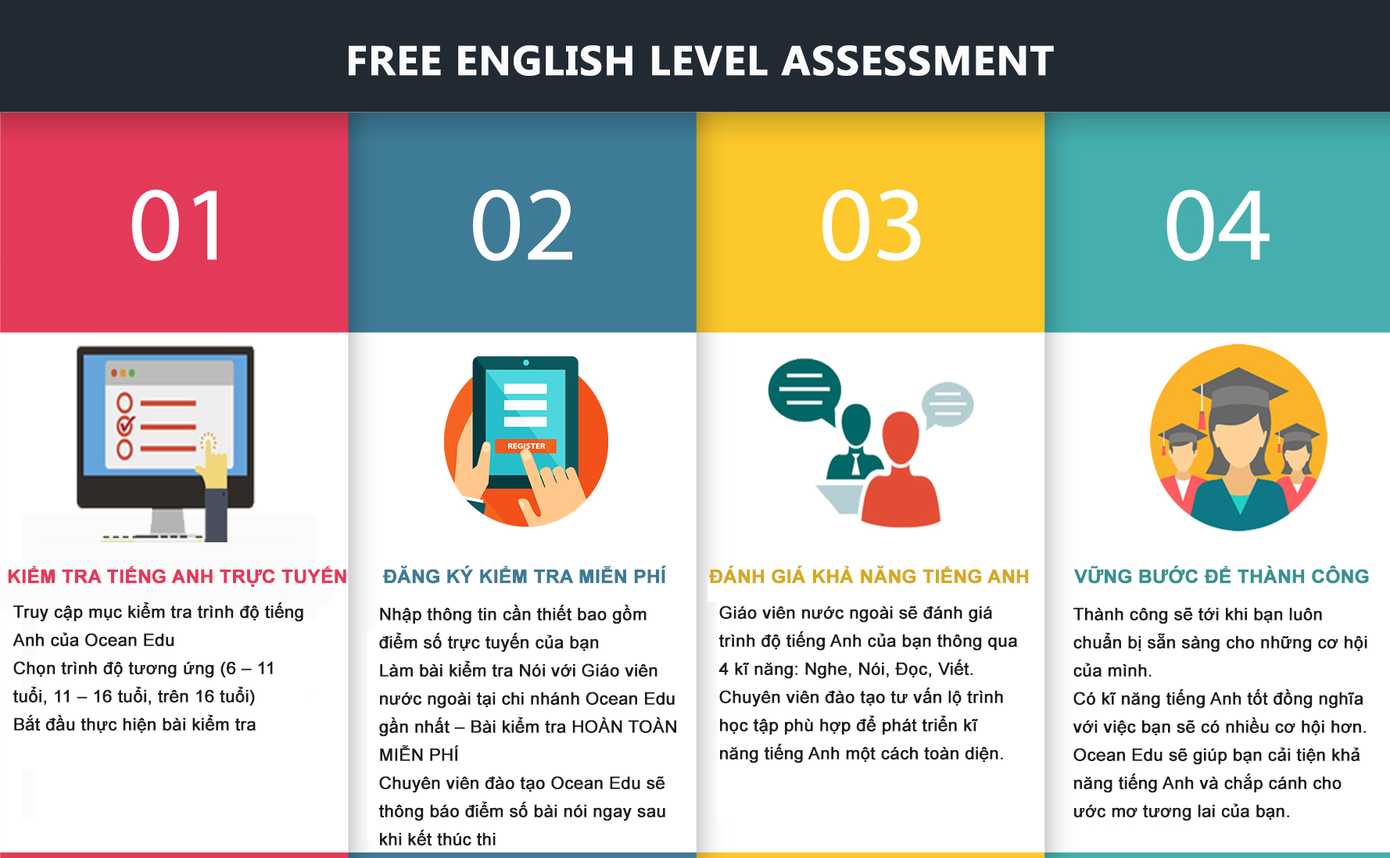
<style>
.page{position:relative;width:1390px;height:858px;background:#ffffff}
.page>*{position:absolute;margin:0}
.t1{font:18.8px "Arial-BoldMT";color:#e33a59;font-weight:bold}
.t2{font:18.8px "Arial-BoldMT";color:#3e7b97;font-weight:bold}
.t3{font:18.8px "Arial-BoldMT";color:#d4a924;font-weight:bold}
.t4{font:18.8px "Arial-BoldMT";color:#399192;font-weight:bold}
.t5{font:17.2px/28.1px "ArialMT";color:#201d1e;font-weight:bold}
</style>
<div class="page">
<p class="t1" style="left:8px;top:566px;width:338px;height:21px">KIỂM TRA TIẾNG ANH TRỰC TUYẾN</p>
<p class="t2" style="left:383px;top:565px;width:284px;height:19px">ĐĂNG KÝ KIỂM TRA MIỄN PHÍ</p>
<p class="t3" style="left:709px;top:565px;width:320px;height:19px">ĐÁNH GIÁ KHẢ NĂNG TIẾNG ANH</p>
<p class="t4" style="left:1074px;top:565px;width:294px;height:19px">VỮNG BƯỚC ĐỂ THÀNH CÔNG</p>
<p class="t5" style="left:13px;top:602px;width:290px;height:131px">Truy cập mục kiểm tra trình độ tiếng Anh của Ocean Edu<br>Chọn trình độ tương ứng (6 – 11 tuổi, 11 – 16 tuổi, trên 16 tuổi)<br>Bắt đầu thực hiện bài kiểm tra</p>
<p class="t5" style="left:378px;top:604px;width:298px;height:242px">Nhập thông tin cần thiết bao gồm điểm số trực tuyến của bạn<br>Làm bài kiểm tra Nói với Giáo viên nước ngoài tại chi nhánh Ocean Edu gần nhất – Bài kiểm tra HOÀN TOÀN MIỄN PHÍ<br>Chuyên viên đào tạo Ocean Edu sẽ thông báo điểm số bài nói ngay sau khi kết thúc thi</p>
<p class="t5" style="left:718px;top:606px;width:299px;height:158px">Giáo viên nước ngoài sẽ đánh giá trình độ tiếng Anh của bạn thông qua 4 kĩ năng: Nghe, Nói, Đọc, Viết.<br>Chuyên viên đào tạo tư vấn lộ trình học tập phù hợp để phát triển kĩ năng tiếng Anh một cách toàn diện.</p>
<p class="t5" style="left:1072px;top:607px;width:295px;height:214px">Thành công sẽ tới khi bạn luôn chuẩn bị sẵn sàng cho những cơ hội của mình.<br>Có kĩ năng tiếng Anh tốt đồng nghĩa với việc bạn sẽ có nhiều cơ hội hơn.<br>Ocean Edu sẽ giúp bạn cải tiện khả năng tiếng Anh và chắp cánh cho ước mơ tương lai của bạn.</p>
</div>
